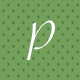
<style>
.page{position:relative;width:80px;height:80px;background:#73a05a}
.page>*{position:absolute;margin:0}
.t1{font:60px "SavoyeLetPlain";color:#ffffff}
</style>
<div class="page">
<p class="t1" style="left:27px;top:20px;width:28px;height:40px">P</p>
</div>
